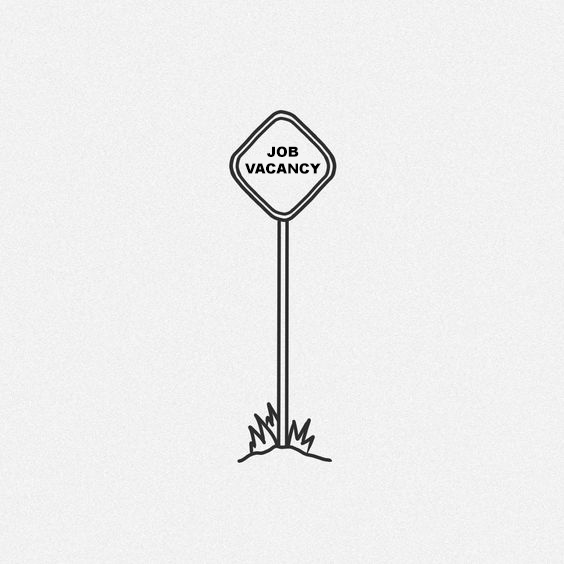
<style>
.page{position:relative;width:564px;height:564px}
.page>*{position:absolute;margin:0}
.t1{font:14px "Arial-Black";color:#000000}
</style>
<div class="page">
<p class="t1" style="left:245px;top:146px;width:76px;height:28px;text-align:center">JOB<br>VACANCY</p>
</div>
